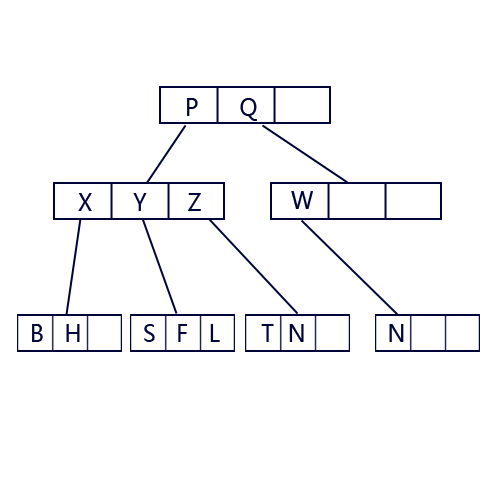
<style>
.page{position:relative;width:500px;height:500px;background:#ffffff}
.page>*{position:absolute;margin:0}
.t1{font:24px "MicrosoftYaHei";letter-spacing:0.02em;color:#000539;scale:0.9 1}
</style>
<div class="page">
<p class="t1" style="left:187px;top:98px;width:70px;height:23px">P      Q</p>
<p class="t1" style="left:78px;top:193px;width:123px;height:18px">X      Y      Z</p>
<p class="t1" style="left:291px;top:191px;width:22px;height:18px">W</p>
<p class="t1" style="left:32px;top:324px;width:372px;height:18px">B   H         S   F   L      T  N            N</p>
</div>
